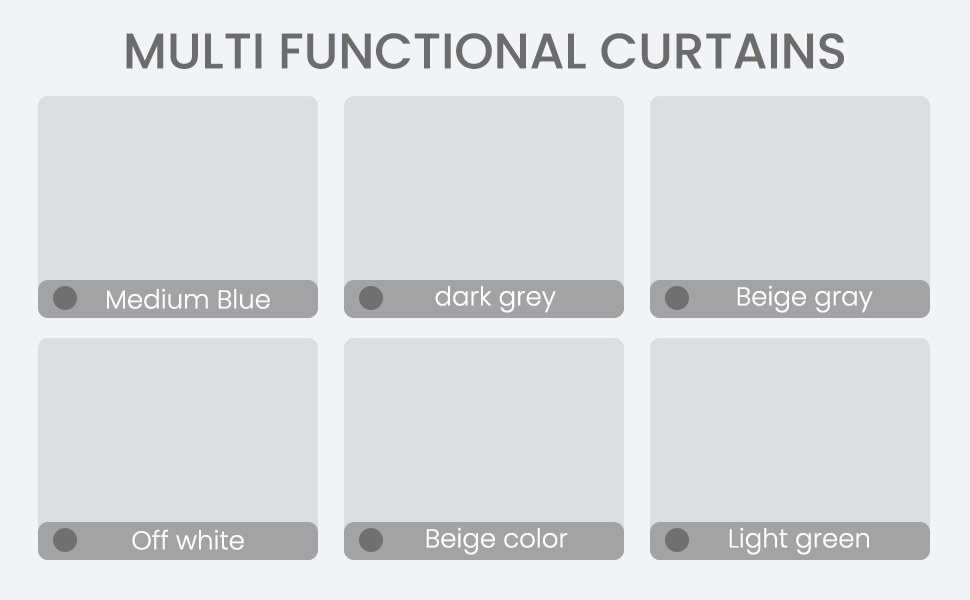
<style>
.page{position:relative;width:970px;height:600px;background:#dcdddf}
.page>*{position:absolute;margin:0}
.t1{font:50px "Poppins-Medium";color:#6c6c6c;text-transform:uppercase}
.t2{font:26px "Poppins-Light";color:#ffffff}
</style>
<div class="page">
<p class="t1" style="left:126px;top:33px;width:718px;height:36px">MULTI FUNCTIONAL CURTAINS</p>
<p class="t2" style="left:107px;top:288px;width:163px;height:21px">Medium Blue</p>
<p class="t2" style="left:435px;top:286px;width:121px;height:27px">dark grey</p>
<p class="t2" style="left:737px;top:285px;width:136px;height:28px">Beige gray</p>
<p class="t2" style="left:132px;top:529px;width:112px;height:21px">Off white</p>
<p class="t2" style="left:426px;top:527px;width:142px;height:28px">Beige color</p>
<p class="t2" style="left:729px;top:527px;width:140px;height:28px">Light green</p>
</div>
